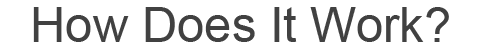
<style>
.page{position:relative;width:480px;height:50px;background:#ffffff}
.page>*{position:absolute;margin:0}
.t1{font:49px "ArialMT";color:#414141}
</style>
<div class="page">
<p class="t1" style="left:33px;top:7px;width:416px;height:35px">How Does It Work?</p>
</div>
